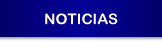
<style>
.page{position:relative;width:162px;height:49px}
.page>*{position:absolute;margin:0}
.t1{font:15px "ArialRoundedMTBold";color:#ffffff}
</style>
<div class="page">
<p class="t1" style="left:45px;top:13px;width:73px;height:12px">NOTICIAS</p>
</div>
